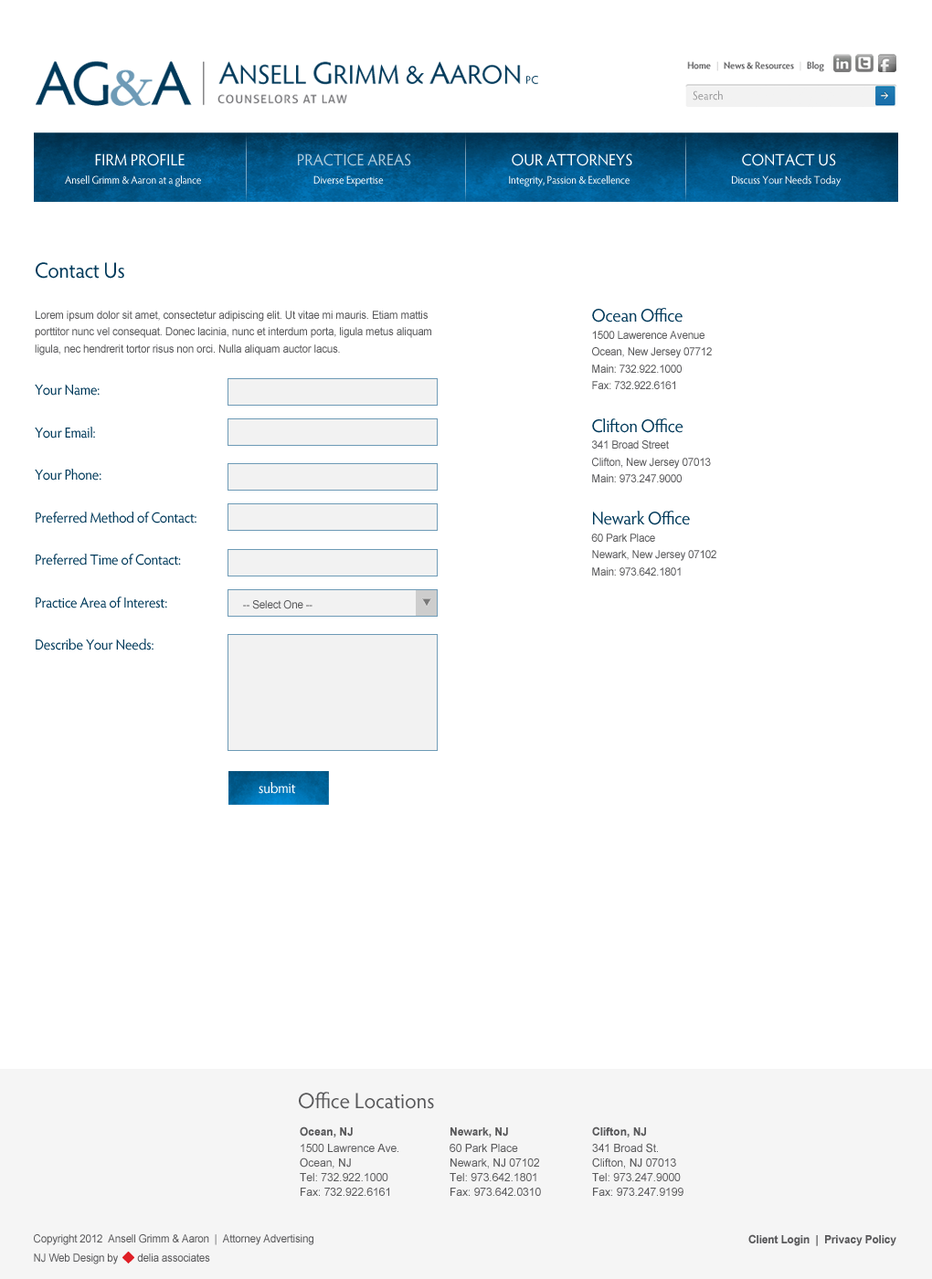
<style>
.page{position:relative;width:932px;height:1279px;background:#ffffff}
.page>*{position:absolute;margin:0}
.t1{font:11.9px "HypatiaSansPro-Regular";color:#969697;scale:0.96 1}
.t2{font:16.4px "HypatiaSansPro-Regular";color:#ffffff;scale:0.96 1}
.t3{font:16.4px "HypatiaSansPro-Regular";color:#b0cada;scale:0.96 1}
.t4{font:11px "HypatiaSansPro-Regular";letter-spacing:-0.01em;color:#ffffff;scale:0.95 1}
.t5{font:11px/16.9px "ArialMT";letter-spacing:-0.015em;color:#58585a;scale:0.96 1}
.t6{font:21.9px "HypatiaSansPro-Regular";letter-spacing:-0.015em;color:#00395a;scale:0.96 1}
.t7{font:14.6px "HypatiaSansPro-Regular";letter-spacing:-0.015em;color:#00395a;scale:0.96 1}
.t8{font:11px "ArialMT";letter-spacing:-0.015em;color:#58585a;scale:0.96 1}
.t9{font:18.3px "HypatiaSansPro-Regular";letter-spacing:-0.015em;color:#00395a;scale:0.96 1}
.t10{font:14.6px "HypatiaSansPro-Regular";letter-spacing:-0.015em;color:#ffffff;scale:0.96 1}
.t11{font:21.9px "HypatiaSansPro-Regular";letter-spacing:-0.005em;color:#58585a;scale:0.97 1}
.t12{font:11.4px/11px "ArialMT";color:#58585a;scale:0.96 1}
.t13{font:11.4px/11px "Arial-BoldMT";color:#58585a;scale:0.96 1}
.t14{font:11.4px/12.8px "ArialMT";color:#58585a;scale:0.96 1}
.t15{font:11px/15.5px "ArialMT";letter-spacing:-0.015em;color:#58585a;scale:0.96 1}
.t16{font:11.4px "Arial-BoldMT";letter-spacing:-0.015em;color:#58585a;scale:0.96 1}
</style>
<div class="page">
<p class="t1" style="left:693px;top:90px;width:30px;height:11px">Search</p>
<p class="t2" style="left:95px;top:154px;width:741px;height:12px">FIRM PROFILE              <span class="t3">PRACTICE AREAS</span>                  OUR ATTORNEYS                  CONTACT US</p>
<p class="t4" style="left:65px;top:175px;width:777px;height:12px">Ansell Grimm &amp; Aaron at a glance                                                    Diverse Expertise                                                          Integrity, Passion &amp; Excellence                                               Discuss Your Needs Today</p>
<p class="t5" style="left:35px;top:262px;width:396px;height:389px"><span class="t6">Contact Us<br></span><br>Lorem ipsum dolor sit amet, consectetur adipiscing elit. Ut vitae mi mauris. Etiam mattis porttitor nunc vel consequat. Donec lacinia, nunc et interdum porta, ligula metus aliquam ligula, nec hendrerit tortor risus non orci. Nulla aliquam auctor lacus. <br><br><span class="t7">Your Name:<br><br>Your Email:<br><br>Your Phone:<br><br>Preferred Method of Contact:<br><br>Preferred Time of Contact:<br><br>Practice Area of Interest:<br><br>Describe Your Needs:</span></p>
<p class="t8" style="left:591px;top:308px;width:125px;height:268px"><span class="t9">Ocean Office<br></span>1500 Lawerence Avenue<br>Ocean, New Jersey 07712<br>Main: 732.922.1000<br>Fax: 732.922.6161<br><br><span class="t9">Clifton Office<br></span>341 Broad Street<br>Clifton, New Jersey 07013<br>Main: 973.247.9000 <br><br><span class="t9">Newark Office<br></span>60 Park Place<br>Newark, New Jersey 07102<br>Main: 973.642.1801</p>
<p class="t8" style="left:243px;top:600px;width:70px;height:10px">-- Select One --</p>
<p class="t10" style="left:259px;top:782px;width:37px;height:12px">submit</p>
<p class="t11" style="left:299px;top:1092px;width:135px;height:17px">Office Locations</p>
<p class="t12" style="left:300px;top:1127px;width:98px;height:69px"><span class="t13">Ocean, NJ<br></span><span class="t14">1500 Lawrence Ave</span>.<br>Ocean, NJ<br>Tel: 732.922.1000<br>Fax: 732.922.6161</p>
<p class="t12" style="left:450px;top:1128px;width:91px;height:68px"><span class="t13">Newark, NJ<br></span><span class="t14">60 Park Place<br></span>Newark, NJ 07102<br>Tel: 973.642.1801<br>Fax: 973.642.0310</p>
<p class="t12" style="left:592px;top:1127px;width:92px;height:69px"><span class="t13">Clifton, NJ<br></span><span class="t14">341 Broad St.<br></span>Clifton, NJ 07013<br>Tel: 973.247.9000<br>Fax: 973.247.9199</p>
<p class="t8" style="left:34px;top:1235px;width:279px;height:30px">Copyright 2012  Ansell Grimm &amp; Aaron  |  Attorney Advertising<br><span class="t15">NJ Web Design by       delia associates</span></p>
<p class="t16" style="left:748px;top:1235px;width:148px;height:11px">Client Login  |  Privacy Policy</p>
</div>
